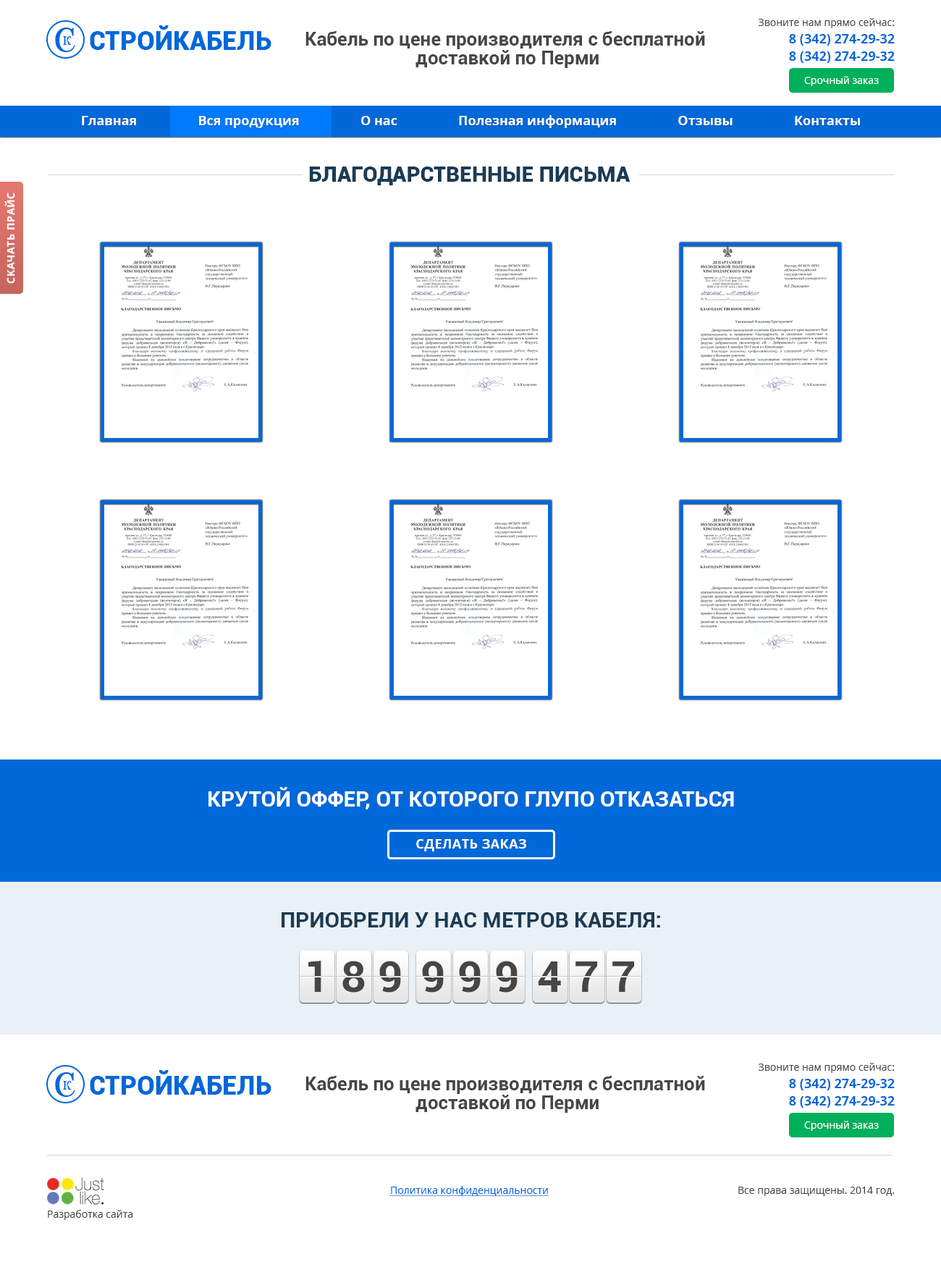
<style>
.page{position:relative;width:941px;height:1267px;background:#ffffff}
.page>*{position:absolute;margin:0}
.t1{font:34.8px "Aver";color:#0068d9}
.t2{font:26.1px "Roboto-Black";color:#0068d9;text-transform:uppercase}
.t3{font:13px/17.4px "OpenSans-Bold";color:#0068d9}
.t4{font:10.1px/13px "OpenSans";color:#464646}
.t5{font:13px "Aver";color:#0068d9}
.t6{font:18.8px/18.8px "Roboto-Bold";color:#464646}
.t7{font:10.1px "OpenSans";color:#ffffff}
.t8{font:13px "OpenSans-Bold";color:#ffffff}
.t9{font:21.7px "Roboto-Black";color:#1b3b54;text-transform:uppercase}
.t10{font:10.1px "OpenSans-Bold";letter-spacing:0.05em;color:#ffffff;text-transform:uppercase}
.t11{font:21.7px "Roboto-Bold";color:#ffffff;text-transform:uppercase}
.t12{font:13px "OpenSans-Bold";letter-spacing:0.025em;color:#ffffff;text-transform:uppercase}
.t13{font:21.7px "Roboto-Bold";color:#1b3b54;text-transform:uppercase}
.t14{font:43.4px "Roboto-Bold";letter-spacing:-0.05em;color:#464646;text-transform:uppercase}
.t15{font:10.1px "OpenSans";color:#0068d9;text-decoration:underline}
.t16{font:10.1px "OpenSans";color:#464646}
</style>
<div class="page">
<p class="t1" style="left:55px;top:28px;width:20px;height:24px">С</p>
<p class="t2" style="left:90px;top:25px;width:181px;height:25px">Стройкабель</p>
<p class="t3" style="left:758px;top:18px;width:137px;height:45px;text-align:right"><span class="t4">Звоните нам прямо сейчас:<br></span>8 (342) 274-29-32<br>8 (342) 274-29-32</p>
<p class="t5" style="left:63px;top:36px;width:9px;height:9px">К</p>
<p class="t6" style="left:306px;top:31px;width:399px;height:37px;text-align:center">Кабель по цене производителя с бесплатной <br>доставкой по Перми</p>
<p class="t7" style="left:804px;top:76px;width:75px;height:10px">Срочный заказ</p>
<p class="t8" style="left:82px;top:115px;width:778px;height:13px">Главная                  Вся продукция                  О нас                  Полезная информация                  Отзывы                  Контакты</p>
<p class="t9" style="left:309px;top:167px;width:322px;height:18px">благодарственные письма</p>
<p class="t10" style="left:4px;top:193px;width:11px;height:91px;rotate:-90deg">Скачать прайс</p>
<p class="t11" style="left:209px;top:787px;width:525px;height:22px">Крутой оффер, от которого глупо отказаться</p>
<p class="t12" style="left:416px;top:839px;width:110px;height:12px">Сделать заказ</p>
<p class="t13" style="left:282px;top:912px;width:378px;height:15px">Приобрели у нас метров кабеля:</p>
<p class="t14" style="left:308px;top:961px;width:13px;height:31px">1</p>
<p class="t14" style="left:342px;top:961px;width:23px;height:32px">8</p>
<p class="t14" style="left:379px;top:961px;width:22px;height:32px">9</p>
<p class="t14" style="left:422px;top:961px;width:22px;height:32px">9</p>
<p class="t14" style="left:459px;top:961px;width:22px;height:32px">9</p>
<p class="t14" style="left:496px;top:961px;width:22px;height:32px">9</p>
<p class="t14" style="left:538px;top:961px;width:23px;height:31px">4</p>
<p class="t14" style="left:576px;top:961px;width:22px;height:31px">7</p>
<p class="t14" style="left:612px;top:961px;width:23px;height:31px">7</p>
<p class="t1" style="left:55px;top:1072px;width:20px;height:25px">С</p>
<p class="t2" style="left:90px;top:1070px;width:181px;height:25px">Стройкабель</p>
<p class="t3" style="left:758px;top:1063px;width:137px;height:45px;text-align:right"><span class="t4">Звоните нам прямо сейчас:<br></span>8 (342) 274-29-32<br>8 (342) 274-29-32</p>
<p class="t5" style="left:63px;top:1081px;width:9px;height:9px">К</p>
<p class="t6" style="left:306px;top:1076px;width:399px;height:37px;text-align:center">Кабель по цене производителя с бесплатной <br>доставкой по Перми</p>
<p class="t7" style="left:804px;top:1121px;width:75px;height:10px">Срочный заказ</p>
<p class="t15" style="left:390px;top:1186px;width:159px;height:10px">Политика конфиденциальности</p>
<p class="t16" style="left:738px;top:1187px;width:156px;height:9px">Все права защищены. 2014 год.</p>
<p class="t16" style="left:48px;top:1210px;width:84px;height:10px">Разработка сайта</p>
</div>
